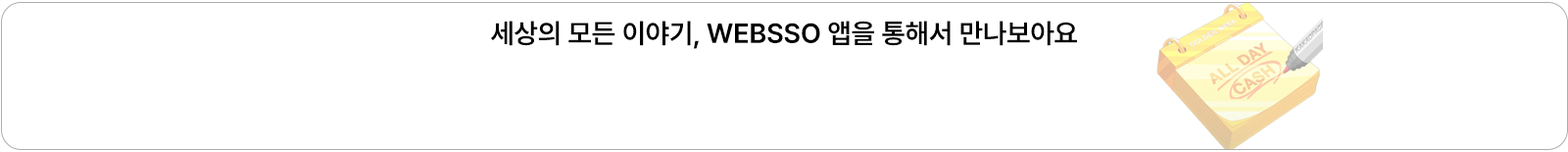
<style>
.page{position:relative;width:1568px;height:152px;background:#ffffff}
.page>*{position:absolute;margin:0}
.t1{font:27.4px "Pretendard-SemiBold";color:#000000}
</style>
<div class="page">
<p class="t1" style="left:491px;top:21px;width:586px;height:28px">세상의 모든 이야기, WEBSSO 앱을 통해서 만나보아요</p>
</div>
